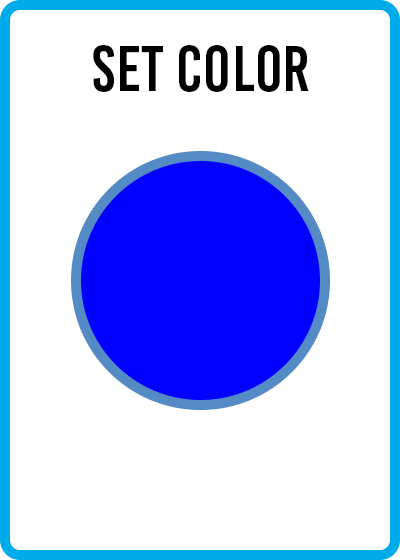
<style>
.page{position:relative;width:400px;height:560px;background:#ffffff}
.page>*{position:absolute;margin:0}
.t1{font:64px "BebasKai";letter-spacing:0.01em;color:#000000}
</style>
<div class="page">
<p class="t1" style="left:93px;top:45px;width:216px;height:47px">Set color</p>
</div>
